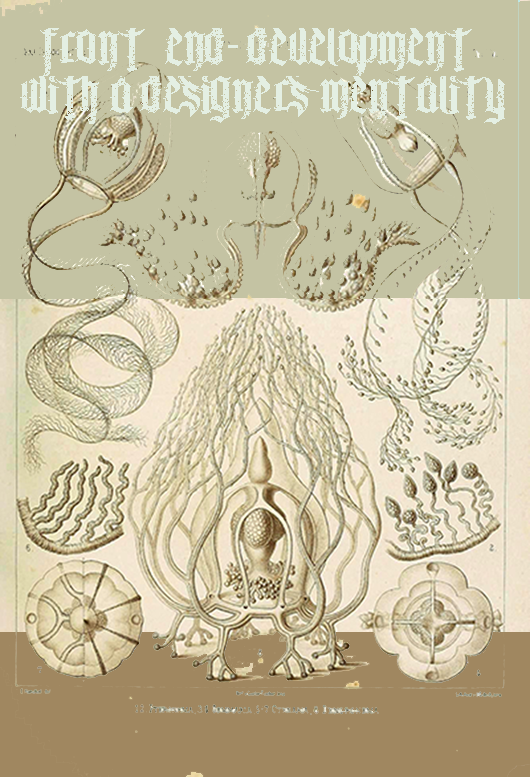
<style>
.page{position:relative;width:530px;height:777px;background:#c4c3a3}
.page>*{position:absolute;margin:0}
.t1{font:40px "ChaosandPain-CnP";color:#e4efe3}
.t2{font:48px "ChaosandPain-CnP";color:#e4efe3}
.t3{font:40px "MyriadPro-Regular";color:#e4efe3}
</style>
<div class="page">
<p class="t1" style="left:20px;top:28px;width:485px;height:96px"><span class="t2">  <br> </span> front  end<span class="t3">-</span> Development<br>with a designers mentality</p>
</div>
